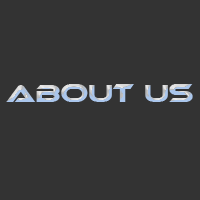
<style>
.page{position:relative;width:200px;height:200px;background:#333333}
.page>*{position:absolute;margin:0}
.t1{font:24px "Ethnocentric"}
</style>
<div class="page">
<p class="t1" style="left:6px;top:84px;width:187px;height:18px">About Us</p>
</div>
